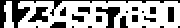
<style>
.page{position:relative;width:180px;height:28px;background:#ffffff}
.page>*{position:absolute;margin:0}
.t1{font:35px "Big-Apple-3PM";color:#ffffff}
</style>
<div class="page">
<p class="t1" style="left:4px;top:1px;width:10px;height:27px">1</p>
<p class="t1" style="left:18px;top:1px;width:18px;height:27px">2</p>
<p class="t1" style="left:36px;top:1px;width:18px;height:27px">3</p>
<p class="t1" style="left:54px;top:1px;width:18px;height:27px">4</p>
<p class="t1" style="left:72px;top:1px;width:18px;height:27px">5</p>
<p class="t1" style="left:90px;top:1px;width:18px;height:27px">6</p>
<p class="t1" style="left:108px;top:1px;width:18px;height:27px">7</p>
<p class="t1" style="left:126px;top:1px;width:18px;height:27px">8</p>
<p class="t1" style="left:144px;top:1px;width:18px;height:27px">9</p>
<p class="t1" style="left:162px;top:1px;width:18px;height:27px">0</p>
</div>
